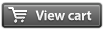
<style>
.page{position:relative;width:106px;height:30px}
.page>*{position:absolute;margin:0}
.t1{font:14px "MyriadPro-Semibold";color:#ffffff}
</style>
<div class="page">
<p class="t1" style="left:35px;top:10px;width:57px;height:11px">View cart</p>
</div>
